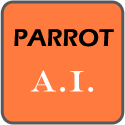
<style>
.page{position:relative;width:125px;height:125px;background:#ff7a3f}
.page>*{position:absolute;margin:0}
.t1{font:25px "ErasITC-Demi";color:#000000}
.t2{font:30px "EngraversMT";color:#fefefe}
</style>
<div class="page">
<p class="t1" style="left:14px;top:29px;width:100px;height:18px">PARROT</p>
<p class="t2" style="left:30px;top:70px;width:64px;height:22px">A.I.</p>
</div>
